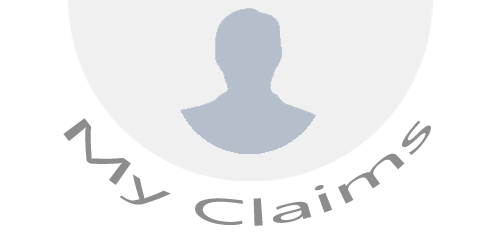
<style>
.page{position:relative;width:500px;height:250px;background:#ffffff}
.page>*{position:absolute;margin:0}
.t1{font:36px "LaoUI";color:#8d8d8d;scale:2 1}
</style>
<div class="page">
<p class="t1" style="left:63px;top:118px;width:368px;height:108px">My Claims</p>
</div>
